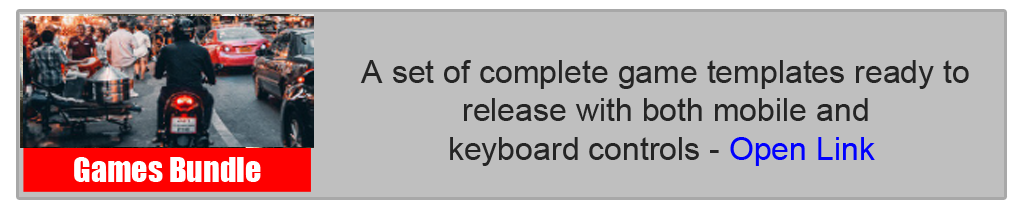
<style>
.page{position:relative;width:1024px;height:210px;background:#bfbfbf}
.page>*{position:absolute;margin:0}
.t1{font:32px "ArialMT";color:#252525}
.t2{font:32px "ArialMT";color:#0000ff}
.t3{font:32px "Impact";color:#ffffff}
</style>
<div class="page">
<p class="t1" style="left:360px;top:60px;width:609px;height:106px;text-align:center">A set of complete game templates ready to <br>release with both mobile and <br>keyboard controls - <span class="t2">Open Link</span></p>
<p class="t3" style="left:74px;top:157px;width:187px;height:25px">Games Bundle</p>
</div>
